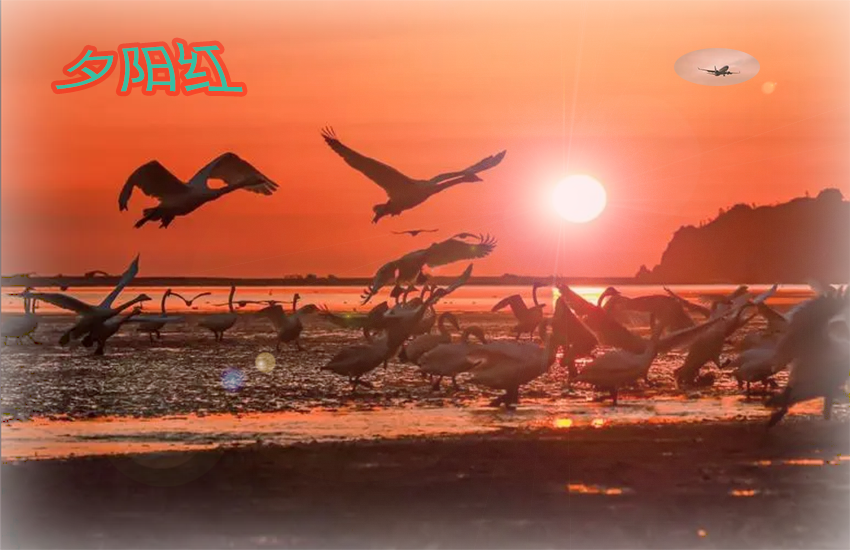
<style>
.page{position:relative;width:850px;height:550px}
.page>*{position:absolute;margin:0}
.t1{font:50.7px "SimHei";letter-spacing:0.002em;color:#37bea3;font-style:italic;scale:1.14 1}
</style>
<div class="page">
<p class="t1" style="left:55px;top:42px;width:188px;height:50px">夕阳红</p>
</div>
